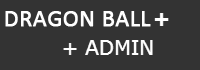
<style>
.page{position:relative;width:200px;height:70px;background:#333333}
.page>*{position:absolute;margin:0}
.t1{font:24px "Calibri";color:#ffffff;font-weight:bold}
</style>
<div class="page">
<p class="t1" style="left:5px;top:11px;width:146px;height:16px">DRAGON BALL</p>
</div>
